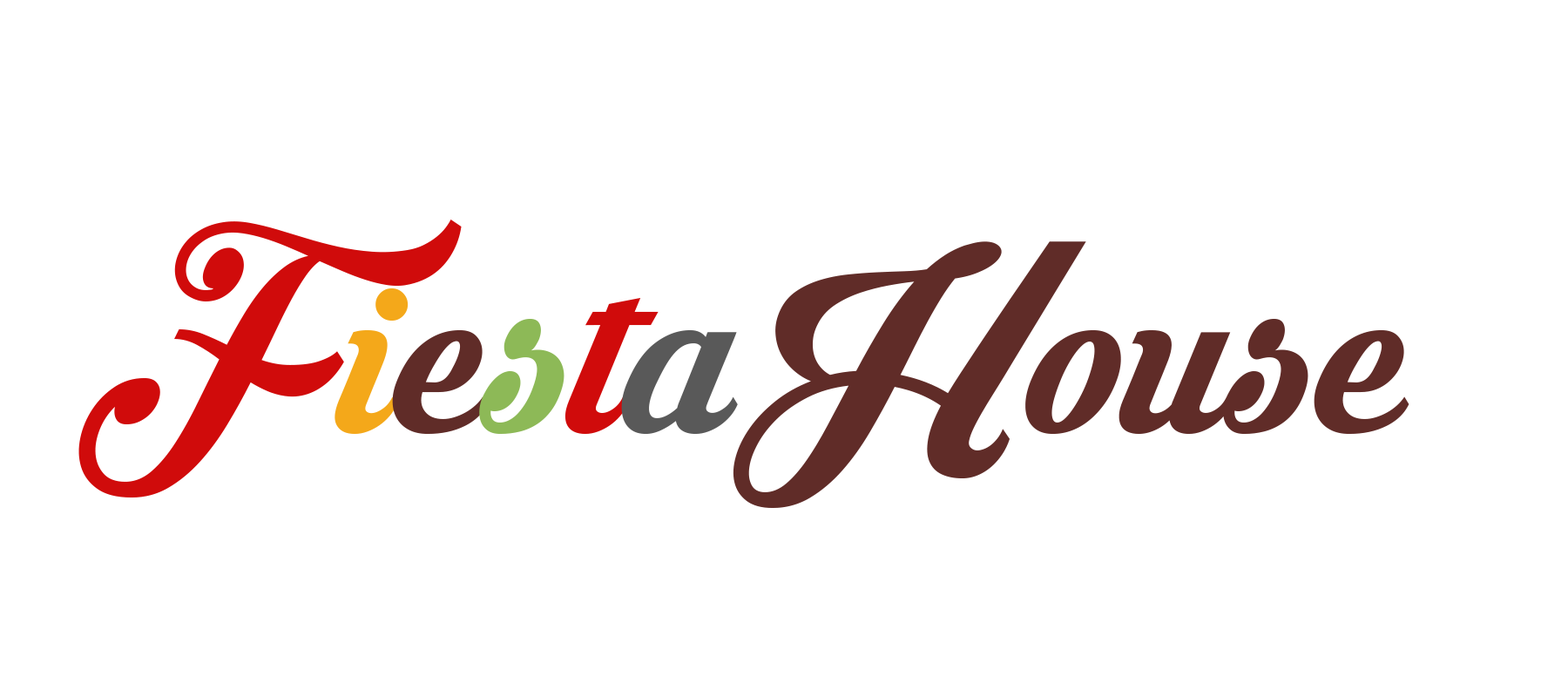
<style>
.page{position:relative;width:1568px;height:697px;background:#ffffff}
.page>*{position:absolute;margin:0}
.t1{font:261.3px "KrinkesDecorPERSONALUSE";color:#d00b0b}
.t2{font:261.3px "KrinkesDecorPERSONALUSE";color:#f4a81a}
.t3{font:261.3px "KrinkesDecorPERSONALUSE";color:#602c28}
.t4{font:261.3px "KrinkesDecorPERSONALUSE";color:#8db957}
.t5{font:261.3px "KrinkesDecorPERSONALUSE";color:#595959}
</style>
<div class="page">
<p class="t1" style="left:78px;top:219px;width:660px;height:278px">F<span class="t2">i</span><span class="t3">e</span><span class="t4">s</span>t<span class="t5">a</span></p>
<p class="t3" style="left:733px;top:241px;width:676px;height:267px">House</p>
</div>
